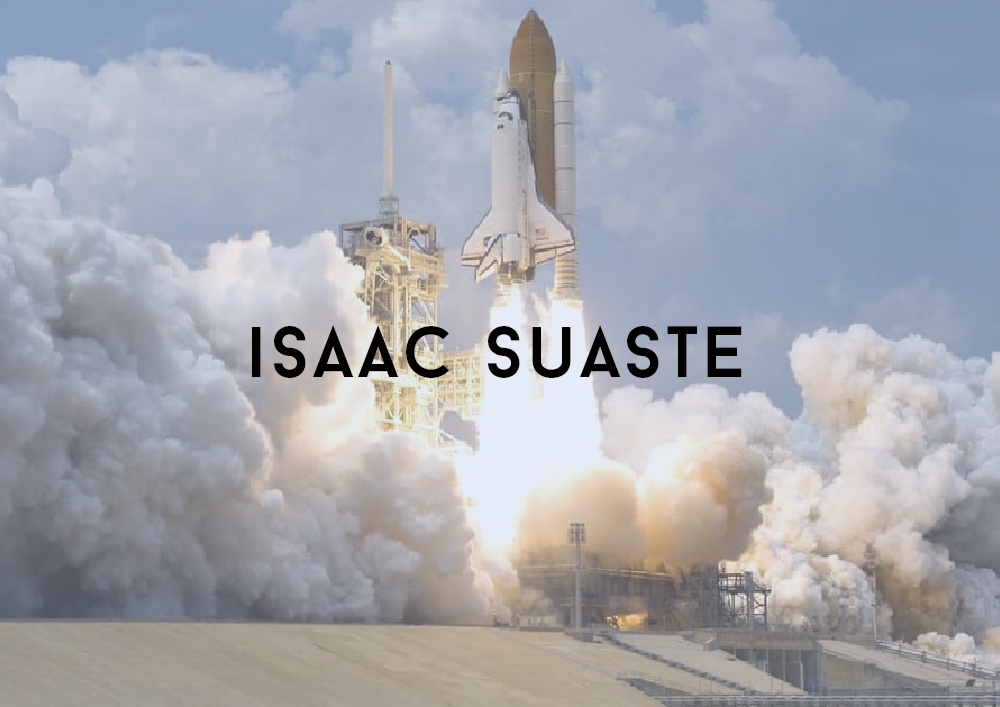
<style>
.page{position:relative;width:1000px;height:707px}
.page>*{position:absolute;margin:0}
.t1{font:72px "BaronNeue";letter-spacing:0.05em;color:#030000}
</style>
<div class="page">
<p class="t1" style="left:252px;top:325px;width:490px;height:53px">isaac suaste</p>
</div>
